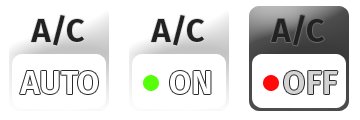
<style>
.page{position:relative;width:360px;height:120px;background:#ffffff}
.page>*{position:absolute;margin:0}
.t1{font:33px "FiraSans-SemiBold";color:#222222}
.t2{font:33px "FiraSans-SemiBold";color:#ffffff}
</style>
<div class="page">
<p class="t1" style="left:31px;top:15px;width:54px;height:31px">A/C</p>
<p class="t1" style="left:151px;top:15px;width:54px;height:31px">A/C</p>
<p class="t1" style="left:271px;top:15px;width:54px;height:31px">A/C</p>
<p class="t2" style="left:20px;top:71px;width:78px;height:23px">AUTO</p>
<p class="t2" style="left:170px;top:71px;width:41px;height:23px">ON</p>
</div>
